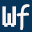
<style>
.page{position:relative;width:32px;height:32px;background:#07345a}
.page>*{position:absolute;margin:0}
.t1{font:36px "Terminal";color:#faf6f6}
.t2{font:30px "ComicSansMS";color:#faf6f6}
</style>
<div class="page">
<p class="t1" style="left:2px;top:6px;width:14px;height:21px">W</p>
<p class="t2" style="left:16px;top:4px;width:14px;height:26px">f</p>
</div>
